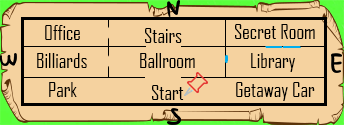
<style>
.page{position:relative;width:344px;height:125px;background:#f5d29f}
.page>*{position:absolute;margin:0}
.t1{font:20px "AgencyFB-Reg";color:#000000}
</style>
<div class="page">
<p class="t1" style="left:45px;top:25px;width:35px;height:15px">Office</p>
<p class="t1" style="left:145px;top:28px;width:37px;height:15px">Stairs</p>
<p class="t1" style="left:235px;top:24px;width:80px;height:15px">Secret Room</p>
<p class="t1" style="left:37px;top:53px;width:50px;height:15px">Billiards</p>
<p class="t1" style="left:140px;top:53px;width:55px;height:15px">Ballroom</p>
<p class="t1" style="left:251px;top:53px;width:44px;height:19px">Library</p>
<p class="t1" style="left:49px;top:82px;width:28px;height:15px">Park</p>
<p class="t1" style="left:152px;top:85px;width:32px;height:15px">Start</p>
<p class="t1" style="left:236px;top:82px;width:79px;height:19px">Getaway Car</p>
</div>
